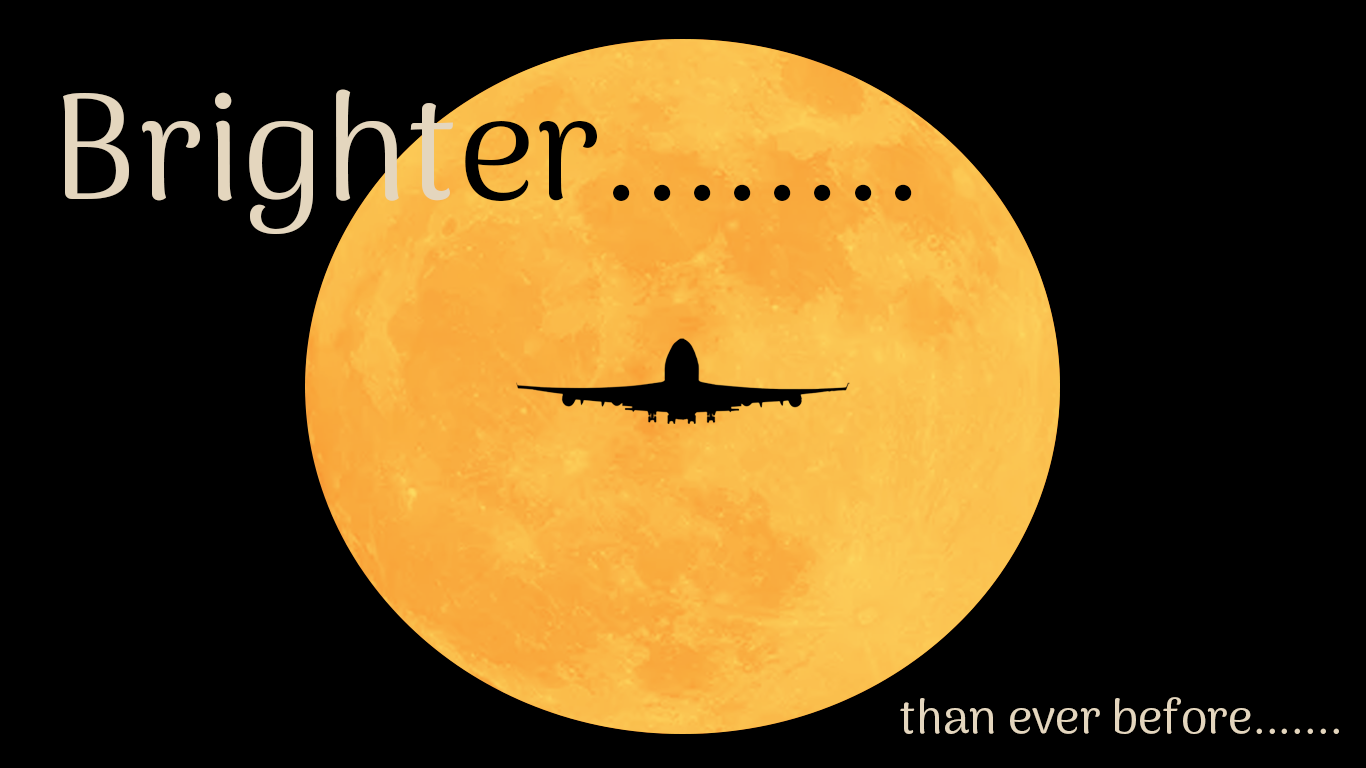
<style>
.page{position:relative;width:1366px;height:768px;background:#000000}
.page>*{position:absolute;margin:0}
.t1{font:150px "ArimaMadurai-Regular";color:#000000}
.t2{font:150px "ArimaMadurai-Regular";color:#e4d6be}
.t3{font:48px "ArimaMadurai-Regular";color:#e4d6be}
</style>
<div class="page">
<p class="t1" style="left:63px;top:89px;width:849px;height:145px"><span class="t2">Bright</span>er........</p>
<p class="t3" style="left:900px;top:697px;width:439px;height:37px">than ever before.......</p>
</div>
